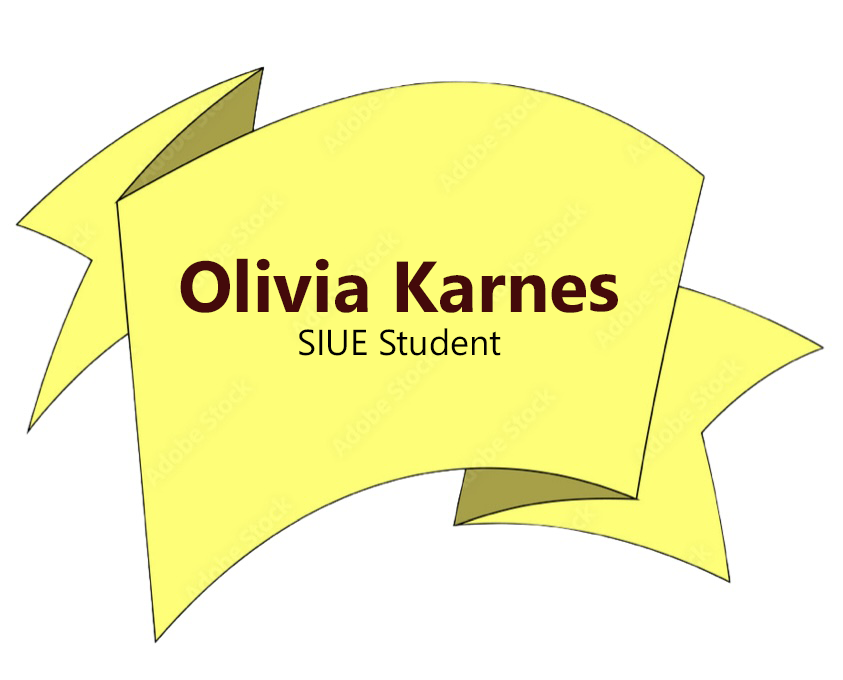
<style>
.page{position:relative;width:843px;height:680px;background:#ffffff}
.page>*{position:absolute;margin:0}
.t1{font:72px "SegoeUI-Bold";color:#440a0a}
.t2{font:36px "SegoeUI";color:#000000}
</style>
<div class="page">
<p class="t1" style="left:180px;top:258px;width:438px;height:98px;text-align:center">Olivia Karnes <br><span class="t2">SIUE Student</span></p>
</div>
